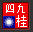
<style>
.page{position:relative;width:33px;height:32px;background:#f20000}
.page>*{position:absolute;margin:0}
.t1{font:10.4px "SimSun";color:#ffffff}
.t2{font:11.7px "SimSun";color:#ffffff}
</style>
<div class="page">
<p class="t1" style="left:6px;top:4px;width:19px;height:9px">四九</p>
<p class="t2" style="left:16px;top:15px;width:11px;height:12px">桂</p>
</div>
